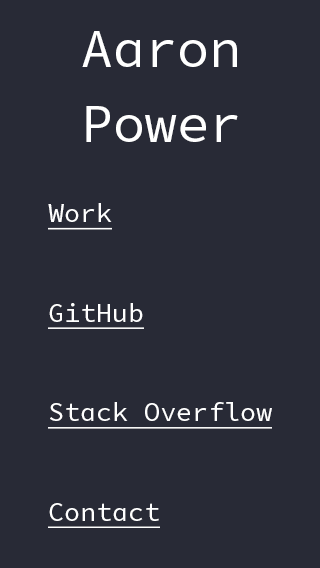
<style>
.page{position:relative;width:320px;height:568px;background:#282a36}
.page>*{position:absolute;margin:0}
.t1{font:53.3px/74.7px "SourceCodePro-Regular";color:#ffffff}
.t2{font:26.7px/99.6px "SourceCodePro-Regular";color:#ffffff;text-decoration:underline}
</style>
<div class="page">
<p class="t1" style="left:82px;top:31px;width:156px;height:111px;text-align:center">Aaron<br>Power</p>
<p class="t2" style="left:48px;top:203px;width:224px;height:325px">Work<br>GitHub<br>Stack Overflow<br>Contact</p>
</div>
